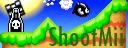
<style>
.page{position:relative;width:128px;height:48px}
.page>*{position:absolute;margin:0}
.t1{font:30px "TwCenMT-Condensed";color:#276e00}
</style>
<div class="page">
<p class="t1" style="left:49px;top:26px;width:74px;height:20px">ShootMii</p>
</div>
